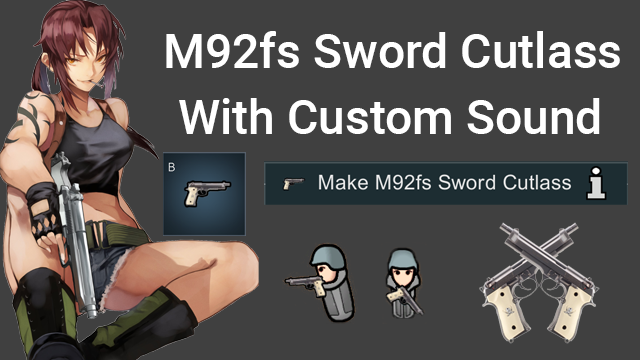
<style>
.page{position:relative;width:640px;height:360px;background:#404040}
.page>*{position:absolute;margin:0}
.t1{font:48px "Roboto-Medium";color:#ffffff}
</style>
<div class="page">
<p class="t1" style="left:166px;top:31px;width:454px;height:37px">M92fs Sword Cutlass</p>
<p class="t1" style="left:179px;top:98px;width:421px;height:36px">With Custom Sound</p>
</div>
